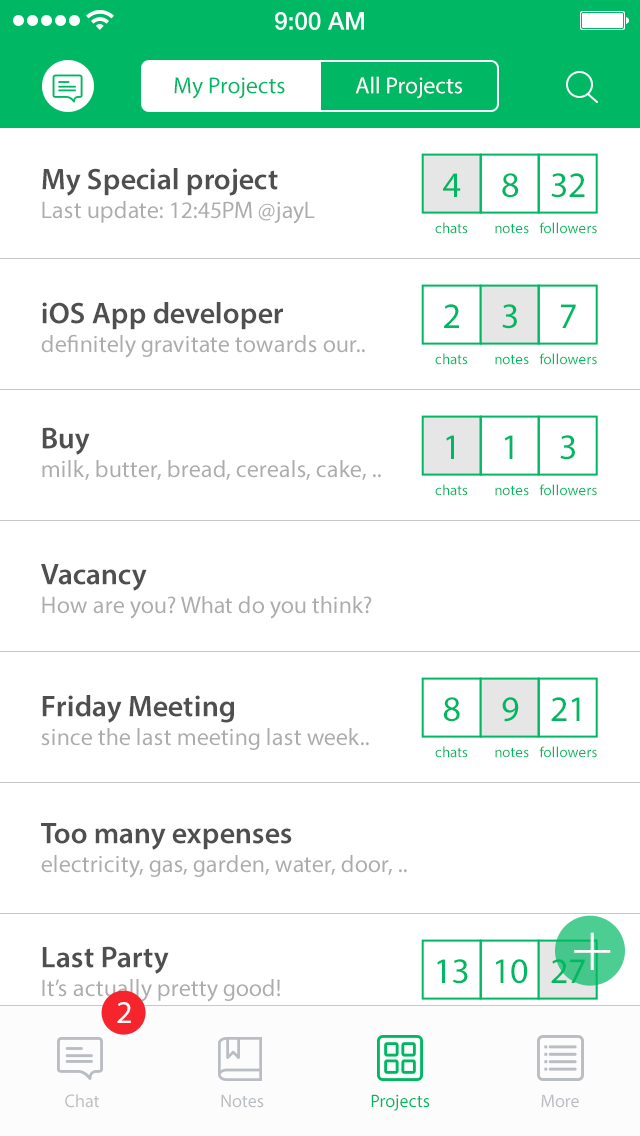
<style>
.page{position:relative;width:640px;height:1136px;background:#ffffff}
.page>*{position:absolute;margin:0}
.t1{font:23.4px "MyriadPro-Regular";color:#00b863}
.t2{font:23.4px "MyriadPro-Regular";color:#ffffff}
.t3{font:24px "MyriadPro-Regular";color:#acacac}
.t4{font:30px "MyriadPro-Semibold";color:#4f4f4f}
.t5{font:36px "MyriadPro-Regular";color:#00b863}
.t6{font:15px "MyriadPro-Regular";color:#00b863}
.t7{font:70px "MyriadPro-Light";color:#ffffff}
.t8{font:32px "MyriadPro-Regular";letter-spacing:0.01em;color:#ffffff}
.t9{font:18px "MyriadPro-Regular";color:#babdc2}
.t10{font:18px "MyriadPro-Regular";color:#00b863}
</style>
<div class="page">
<p class="t1" style="left:174px;top:77px;width:111px;height:22px">My Projects</p>
<p class="t2" style="left:355px;top:76px;width:107px;height:23px">All Projects</p>
<p class="t3" style="left:42px;top:168px;width:273px;height:56px"><span class="t4">My Special project<br></span>Last update: 12:45PM @jayL</p>
<p class="t5" style="left:443px;top:173px;width:18px;height:24px">4</p>
<p class="t5" style="left:502px;top:173px;width:17px;height:25px">8</p>
<p class="t5" style="left:551px;top:173px;width:34px;height:25px">32</p>
<p class="t6" style="left:435px;top:222px;width:33px;height:12px">chats</p>
<p class="t6" style="left:539px;top:222px;width:58px;height:12px">followers</p>
<p class="t6" style="left:495px;top:223px;width:34px;height:11px">notes</p>
<p class="t3" style="left:41px;top:302px;width:324px;height:56px"><span class="t4">iOS App developer<br></span>definitely gravitate towards our..</p>
<p class="t5" style="left:444px;top:304px;width:15px;height:24px">2</p>
<p class="t5" style="left:502px;top:304px;width:15px;height:25px">3</p>
<p class="t5" style="left:561px;top:304px;width:15px;height:24px">7</p>
<p class="t6" style="left:435px;top:353px;width:33px;height:12px">chats</p>
<p class="t6" style="left:539px;top:353px;width:58px;height:12px">followers</p>
<p class="t6" style="left:495px;top:354px;width:34px;height:11px">notes</p>
<p class="t3" style="left:42px;top:427px;width:339px;height:53px"><span class="t4">Buy<br></span>milk, butter, bread, cereals, cake, ..</p>
<p class="t5" style="left:446px;top:435px;width:8px;height:24px">1</p>
<p class="t5" style="left:504px;top:435px;width:9px;height:24px">1</p>
<p class="t5" style="left:560px;top:435px;width:15px;height:25px">3</p>
<p class="t6" style="left:435px;top:484px;width:33px;height:12px">chats</p>
<p class="t6" style="left:495px;top:485px;width:34px;height:11px">notes</p>
<p class="t6" style="left:539px;top:484px;width:58px;height:12px">followers</p>
<p class="t3" style="left:41px;top:564px;width:331px;height:55px"><span class="t4">Vacancy<br></span>How are you? What do you think?</p>
<p class="t3" style="left:41px;top:695px;width:328px;height:55px"><span class="t4">Friday Meeting<br></span>since the last meeting last week..</p>
<p class="t5" style="left:443px;top:697px;width:17px;height:25px">8</p>
<p class="t5" style="left:502px;top:697px;width:17px;height:25px">9</p>
<p class="t5" style="left:551px;top:697px;width:29px;height:24px">21</p>
<p class="t6" style="left:435px;top:746px;width:33px;height:12px">chats</p>
<p class="t6" style="left:495px;top:747px;width:34px;height:11px">notes</p>
<p class="t6" style="left:539px;top:746px;width:58px;height:12px">followers</p>
<p class="t3" style="left:41px;top:823px;width:366px;height:55px"><span class="t4">Too many expenses<br></span>electricity, gas, garden, water, door, ..</p>
<p class="t7" style="left:574px;top:932px;width:37px;height:38px">+</p>
<p class="t3" style="left:42px;top:946px;width:238px;height:56px"><span class="t4">Last Party<br></span>It’s actually pretty good!</p>
<p class="t5" style="left:437px;top:959px;width:31px;height:25px">13</p>
<p class="t5" style="left:495px;top:959px;width:33px;height:25px">10</p>
<p class="t5" style="left:551px;top:959px;width:34px;height:24px">27</p>
<p class="t8" style="left:117px;top:1002px;width:14px;height:21px">2</p>
<p class="t9" style="left:65px;top:1094px;width:34px;height:14px">Chat</p>
<p class="t9" style="left:221px;top:1094px;width:43px;height:14px">Notes</p>
<p class="t10" style="left:371px;top:1094px;width:59px;height:17px">Projects</p>
<p class="t9" style="left:541px;top:1094px;width:38px;height:14px">More</p>
</div>
